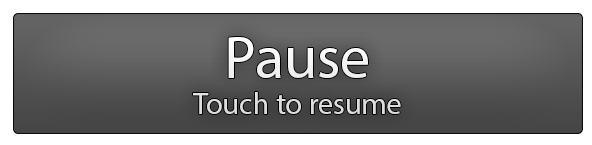
<style>
.page{position:relative;width:592px;height:145px}
.page>*{position:absolute;margin:0}
.t1{font:30px "MyriadPro-Regular";color:#ffffff}
.t2{font:59.8px "MyriadPro-Regular";color:#ffffff}
</style>
<div class="page">
<p class="t1" style="left:193px;top:37px;width:208px;height:77px;text-align:center"><span class="t2">Pause<br></span>Touch to resume</p>
</div>
